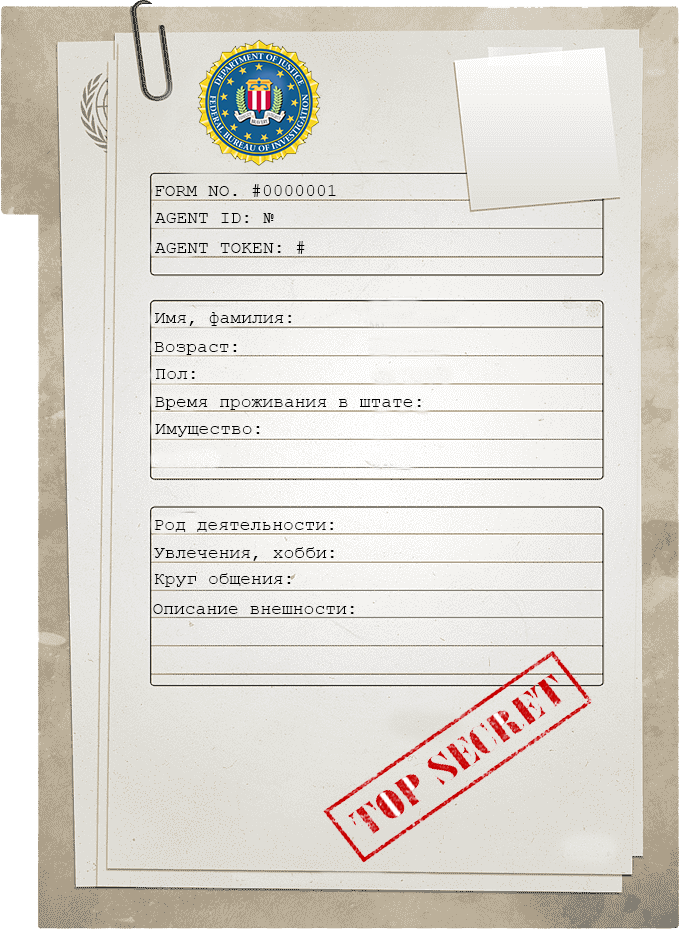
<style>
.page{position:relative;width:679px;height:929px}
.page>*{position:absolute;margin:0}
.t1{font:18px "CourierNewPSMT";color:#000000}
</style>
<div class="page">
<p class="t1" style="left:155px;top:184px;width:181px;height:13px">FORM NO. #0000001</p>
<p class="t1" style="left:155px;top:213px;width:119px;height:10px">AGENT ID: №</p>
<p class="t1" style="left:155px;top:241px;width:150px;height:13px">AGENT TOKEN: #</p>
<p class="t1" style="left:155px;top:312px;width:137px;height:14px">Имя, фамилия:</p>
<p class="t1" style="left:154px;top:342px;width:83px;height:13px">Возраст:</p>
<p class="t1" style="left:156px;top:369px;width:39px;height:10px">Пол:</p>
<p class="t1" style="left:155px;top:397px;width:266px;height:13px">Время проживания в штате:</p>
<p class="t1" style="left:155px;top:424px;width:105px;height:13px">Имущество:</p>
<p class="t1" style="left:155px;top:520px;width:179px;height:12px">Род деятельности:</p>
<p class="t1" style="left:154px;top:547px;width:180px;height:14px">Увлечения, хобби:</p>
<p class="t1" style="left:154px;top:573px;width:137px;height:14px">Круг общения:</p>
<p class="t1" style="left:153px;top:604px;width:201px;height:10px">Описание внешности:</p>
</div>
